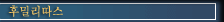
<style>
.page{position:relative;width:224px;height:22px}
.page>*{position:absolute;margin:0}
.t1{font:12.1px "BatangChe";color:#ffcc66;scale:0.91 1}
</style>
<div class="page">
<p class="t1" style="left:8px;top:5px;width:55px;height:13px">후밀리따스</p>
</div>
